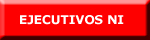
<style>
.page{position:relative;width:150px;height:40px;background:#ff0000}
.page>*{position:absolute;margin:0}
.t1{font:12px "Verdana-Bold";color:#ffffff}
</style>
<div class="page">
<p class="t1" style="left:20px;top:15px;width:104px;height:10px">EJECUTIVOS NI</p>
</div>
